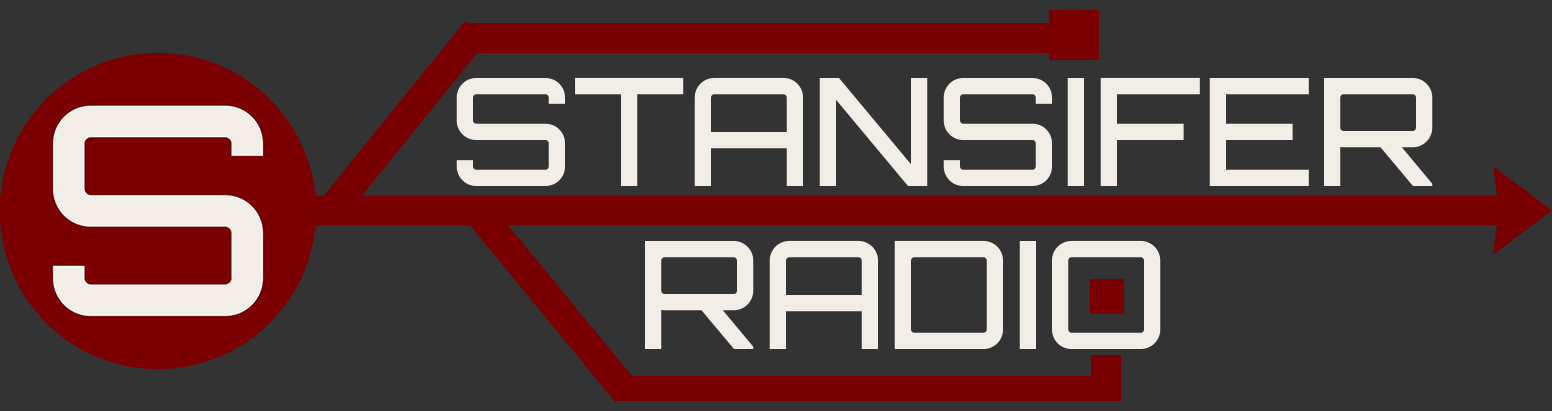
<style>
.page{position:relative;width:1552px;height:411px;background:#333333}
.page>*{position:absolute;margin:0}
.t1{font:150px "Orbitron-Medium";color:#f2ede6}
</style>
<div class="page">
<p class="t1" style="left:456px;top:77px;width:977px;height:109px">STANSIFER</p>
<p class="t1" style="left:645px;top:240px;width:516px;height:109px">RADIO</p>
</div>
